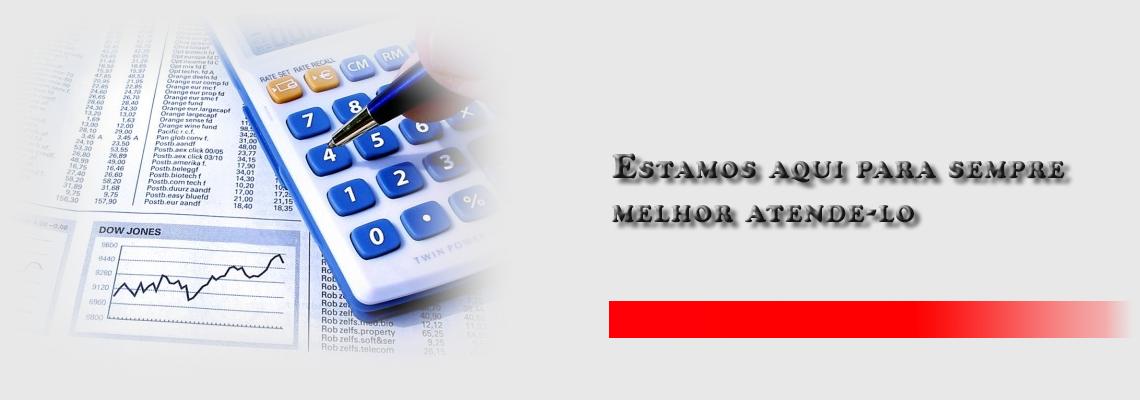
<style>
.page{position:relative;width:1140px;height:400px;background:#e8e8e8}
.page>*{position:absolute;margin:0}
.t1{font:36px "CooperBlack";letter-spacing:0.05em;font-variant:small-caps}
</style>
<div class="page">
<p class="t1" style="left:612px;top:153px;width:453px;height:70px">Estamos aqui para sempre <br>melhor atende-lo</p>
</div>
